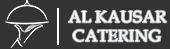
<style>
.page{position:relative;width:170px;height:49px;background:#333333}
.page>*{position:absolute;margin:0}
.t1{font:16px "BookAntiqua";color:#ffffff;text-transform:uppercase;font-weight:bold}
</style>
<div class="page">
<p class="t1" style="left:68px;top:10px;width:99px;height:32px;text-align:center">Al Kausar<br>Catering</p>
</div>
